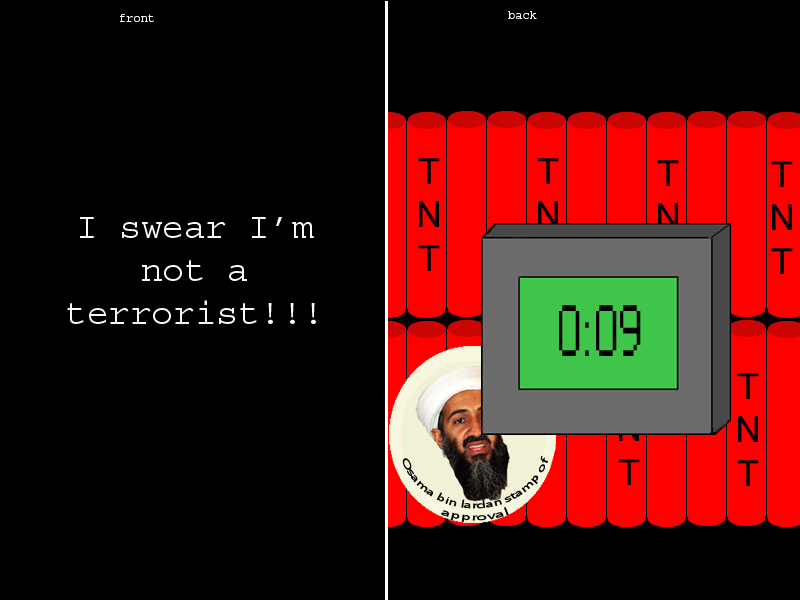
<style>
.page{position:relative;width:800px;height:600px;background:#000000}
.page>*{position:absolute;margin:0}
.t1{font:12px "Courier";color:#fcf9f9}
.t2{font:36px "MicrosoftSansSerif";color:#000000}
.t3{font:36px "Courier";color:#fcf9f9}
.t4{font:72px "Photoshop Large";color:#030303}
.t5{font:36px "MicrosoftSansSerif"}
.t6{font:10px "Myriad-Roman";color:#000000}
</style>
<div class="page">
<p class="t1" style="left:120px;top:14px;width:34px;height:8px">front</p>
<p class="t1" style="left:508px;top:11px;width:29px;height:8px">back</p>
<p class="t2" style="left:418px;top:158px;width:22px;height:113px;text-align:center">T<br>N<br>T</p>
<p class="t2" style="left:537px;top:158px;width:22px;height:113px;text-align:center">T<br>N<br>T</p>
<p class="t2" style="left:657px;top:160px;width:22px;height:113px;text-align:center">T<br>N<br>T</p>
<p class="t2" style="left:771px;top:161px;width:22px;height:113px;text-align:center">T<br>N<br>T</p>
<p class="t3" style="left:67px;top:217px;width:249px;height:107px;text-align:center">I swear I’m <br>not a <br>terrorist!!!</p>
<p class="t4" style="left:559px;top:305px;width:82px;height:51px">0:09</p>
<p class="t5" style="left:618px;top:372px;width:22px;height:113px;text-align:center">T<br>N<br>T</p>
<p class="t2" style="left:737px;top:373px;width:22px;height:113px;text-align:center">T<br>N<br>T</p>
<p class="t6" style="left:402px;top:455px;width:146px;height:67px;text-align:center">Osama bin lardan stamp of approval</p>
</div>
